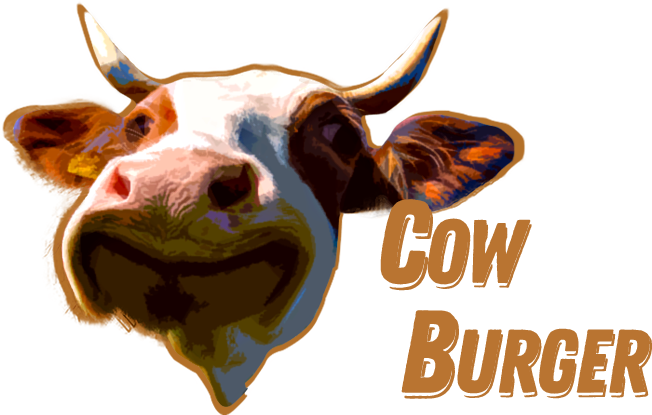
<style>
.page{position:relative;width:652px;height:415px;background:#ffffff}
.page>*{position:absolute;margin:0}
.t1{font:90.2px/109.7px "ZingRustDemo-Base";letter-spacing:-0.025em;color:#b97431}
.t2{font:117.1px/109.7px "ZingRustDemo-Base";letter-spacing:-0.025em;color:#b97431}
</style>
<div class="page">
<p class="t1" style="left:380px;top:199px;width:270px;height:195px;text-align:right"><span class="t2">C</span>ow<br><span class="t2">B</span>urger</p>
</div>
